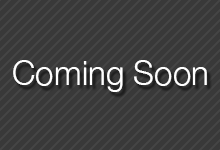
<style>
.page{position:relative;width:220px;height:150px;background:#393939}
.page>*{position:absolute;margin:0}
.t1{font:33.5px "HelveticaNeue-Light";color:#ffffff}
</style>
<div class="page">
<p class="t1" style="left:13px;top:60px;width:194px;height:32px">Coming Soon</p>
</div>
